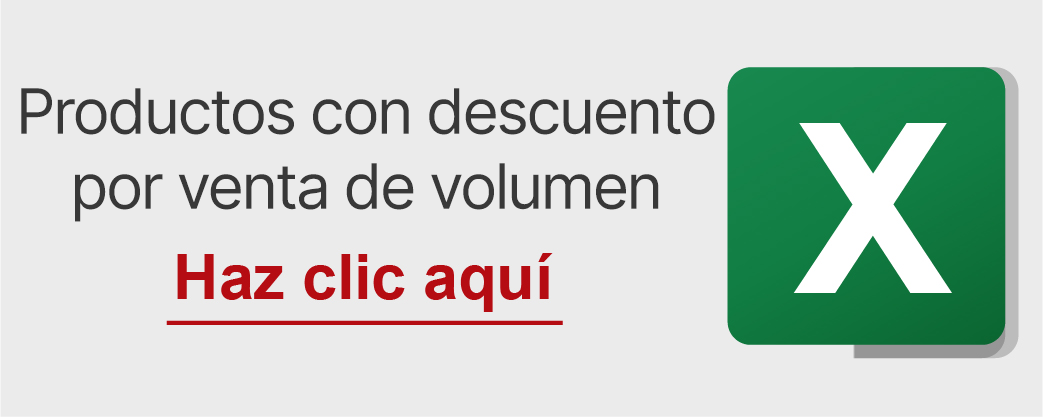
<style>
.page{position:relative;width:1043px;height:417px;background:#ebebeb}
.page>*{position:absolute;margin:0}
.t1{font:62.5px "Inter-Regular";letter-spacing:-0.04em;color:#383838}
</style>
<div class="page">
<p class="t1" style="left:21px;top:88px;width:694px;height:134px;text-align:center">Productos con descuento<br>por venta de volumen</p>
</div>
